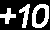
<style>
.page{position:relative;width:50px;height:30px;background:#000000}
.page>*{position:absolute;margin:0}
.t1{font:32px "ArialMT";letter-spacing:-0.1em;color:#ffffff;font-weight:bold;font-style:italic}
</style>
<div class="page">
<p class="t1" style="left:0px;top:4px;width:49px;height:24px">+10</p>
</div>
